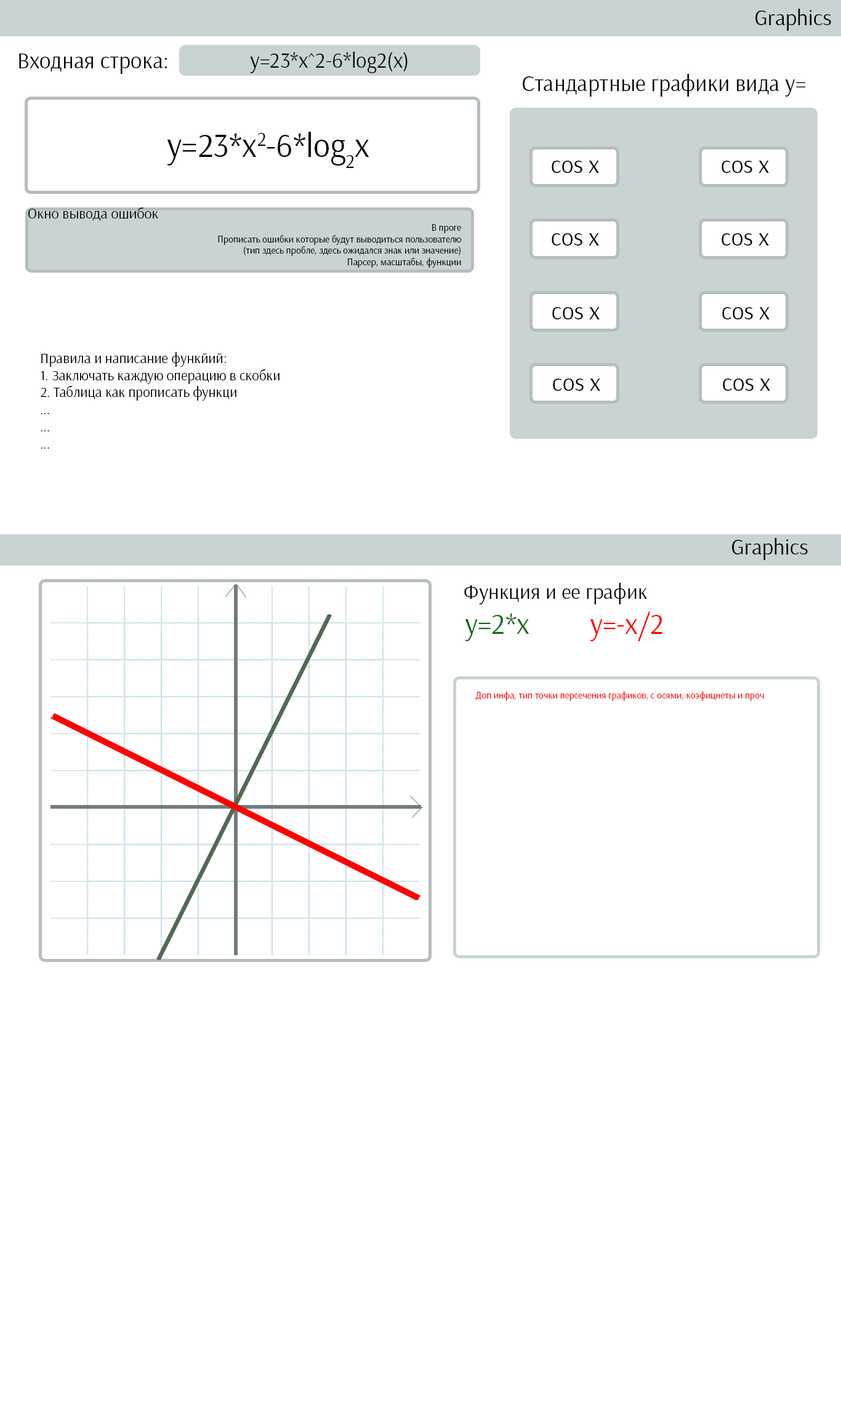
<style>
.page{position:relative;width:841px;height:1418px;background:#ffffff}
.page>*{position:absolute;margin:0}
.t1{font:22.2px "Arsenal-Regular";color:#040404}
.t2{font:22.6px "Arsenal-Regular";color:#040404}
.t3{font:21.5px "Arsenal-Regular";color:#040404}
.t4{font:33.2px "Arsenal-Regular";color:#040404}
.t5{font:24.1px "Arsenal-Regular";color:#040404}
.t6{font:14.8px "Arsenal-Regular";color:#040404}
.t7{font:9.6px "Arsenal-Regular";color:#040404}
.t8{font:14.2px "Arsenal-Regular";color:#040404}
.t9{font:21px "Arsenal-Regular";color:#040404}
.t10{font:28.9px "Arsenal-Regular";color:#176b15}
.t11{font:28.9px "Arsenal-Regular";color:#ff0000}
.t12{font:9.6px "Arsenal-Regular";color:#ff0000}
</style>
<div class="page">
<p class="t1" style="left:755px;top:9px;width:76px;height:22px">Graphics</p>
<p class="t2" style="left:19px;top:54px;width:148px;height:20px">Входная строка:</p>
<p class="t3" style="left:250px;top:52px;width:157px;height:21px">y=23*x^2-6*log2(x)</p>
<p class="t2" style="left:523px;top:74px;width:282px;height:23px">Стандартные графики вида у=</p>
<p class="t4" style="left:167px;top:132px;width:202px;height:36px">y=23*x2-6*log2x</p>
<p class="t5" style="left:552px;top:161px;width:47px;height:12px">cos x</p>
<p class="t5" style="left:721px;top:161px;width:48px;height:12px">cos x</p>
<p class="t6" style="left:28px;top:207px;width:130px;height:14px">Окно вывода ошибок</p>
<p class="t7" style="left:218px;top:224px;width:243px;height:44px;text-align:right">В проге<br>Прописать ошибки которые будут выводиться пользователю<br>(тип здесь пробле, здесь ожидался знак или значение)<br>Парсер, масштабы, функции</p>
<p class="t5" style="left:552px;top:233px;width:47px;height:13px">cos x</p>
<p class="t5" style="left:721px;top:233px;width:48px;height:13px">cos x</p>
<p class="t5" style="left:552px;top:307px;width:48px;height:12px">cos x</p>
<p class="t5" style="left:722px;top:307px;width:47px;height:12px">cos x</p>
<p class="t8" style="left:41px;top:352px;width:238px;height:97px">Правила и написание функйий:<br>1. Заключать каждую операцию в скобки <br>2. Таблица как прописать функци<br>...<br>...<br>...</p>
<p class="t5" style="left:553px;top:379px;width:47px;height:12px">cos x</p>
<p class="t5" style="left:723px;top:379px;width:47px;height:12px">cos x</p>
<p class="t1" style="left:732px;top:538px;width:76px;height:22px">Graphics</p>
<p class="t9" style="left:464px;top:583px;width:183px;height:21px">Функция и ее график</p>
<p class="t10" style="left:465px;top:614px;width:64px;height:27px">у=2*х</p>
<p class="t11" style="left:590px;top:612px;width:72px;height:29px">у=-х/2</p>
<p class="t12" style="left:475px;top:691px;width:289px;height:10px">Доп инфа, тип точки персечения графиков, с осями, коэфицнеты и проч</p>
</div>
